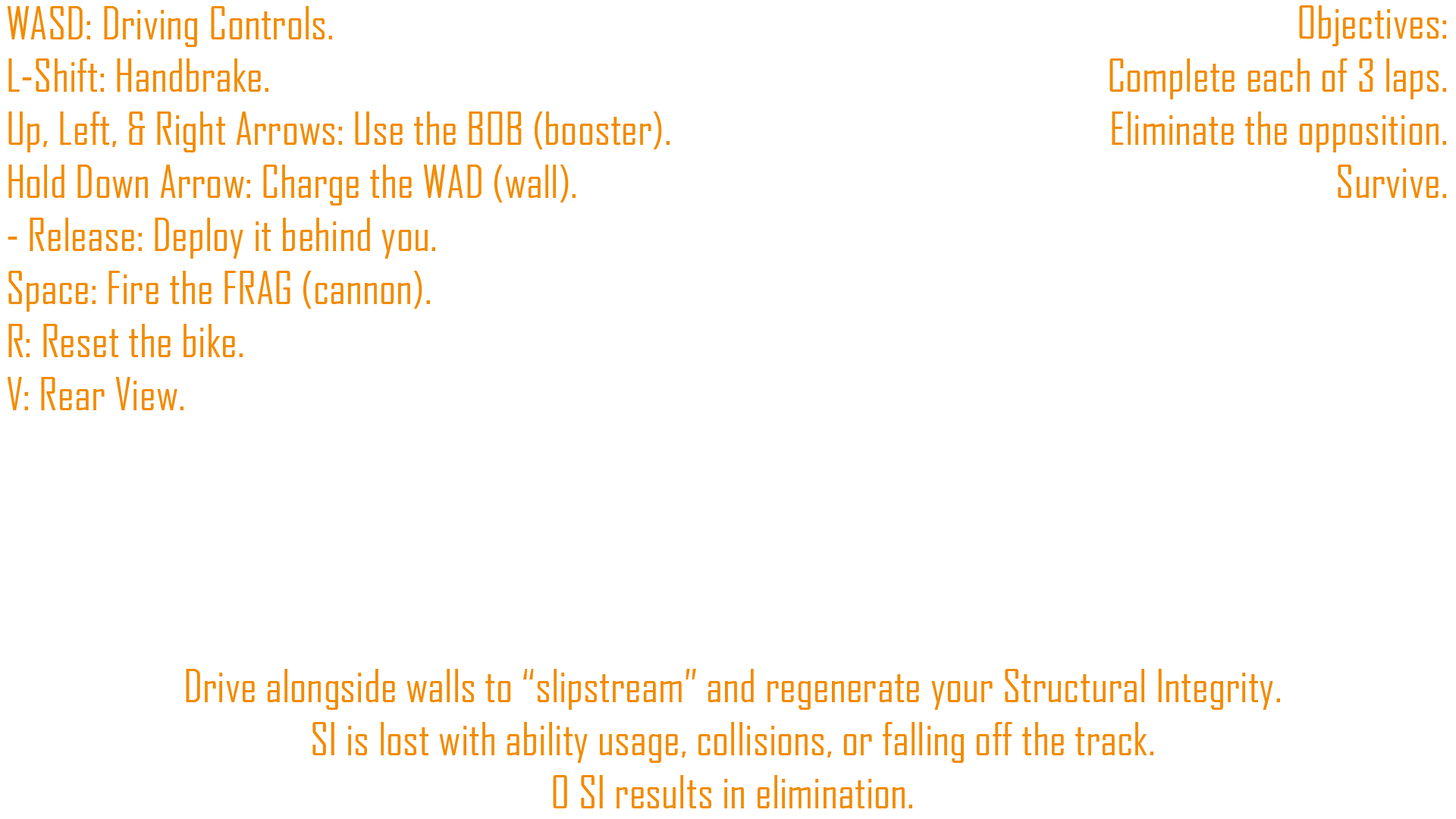
<style>
.page{position:relative;width:1456px;height:819px;background:#ffffff}
.page>*{position:absolute;margin:0}
.t1{font:44.2px "AgencyFB-Reg";color:#f28b00}
</style>
<div class="page">
<p class="t1" style="left:1109px;top:5px;width:337px;height:193px;text-align:right">Objectives:<br>Complete each of 3 laps.<br>Eliminate the opposition.<br>Survive.</p>
<p class="t1" style="left:7px;top:6px;width:663px;height:404px">WASD: Driving Controls.<br>L-Shift: Handbrake.<br>Up, Left, &amp; Right Arrows: Use the BOB (booster).<br>Hold Down Arrow: Charge the WAD (wall).<br>- Release: Deploy it behind you.<br>Space: Fire the FRAG (cannon).<br>R: Reset the bike.<br>V: Rear View.</p>
<p class="t1" style="left:186px;top:669px;width:1094px;height:139px;text-align:center">Drive alongside walls to “slipstream” and regenerate your Structural Integrity.<br>SI is lost with ability usage, collisions, or falling off the track.<br>0 SI results in elimination.</p>
</div>
